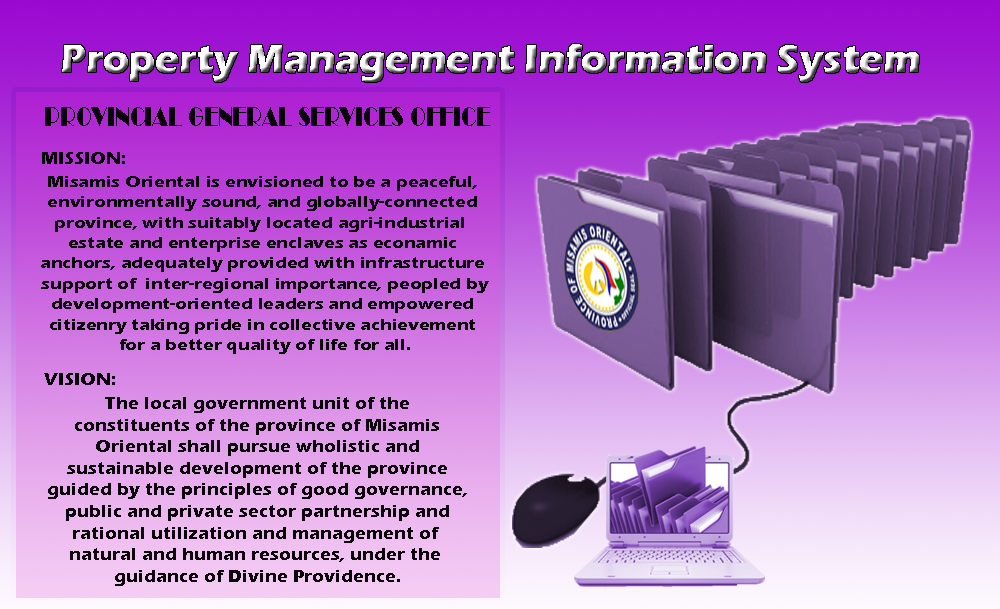
<style>
.page{position:relative;width:1000px;height:609px}
.page>*{position:absolute;margin:0}
.t1{font:40px "ErasITC-Bold"}
.t2{font:27.9px "Broadway";color:#090208;scale:0.74 1}
.t3{font:18px "ErasITC-Bold";color:#090208}
.t4{font:17px "ErasITC-Bold";color:#090208;scale:1.06 1}
.t5{font:18px "ErasITC-Bold";color:#050105}
</style>
<div class="page">
<p class="t1" style="left:62px;top:44px;width:857px;height:38px">Property Management Information System</p>
<p class="t2" style="left:45px;top:107px;width:445px;height:19px">PROVINCIAL GENERAL SERVICES OFFICE</p>
<p class="t3" style="left:42px;top:152px;width:83px;height:12px">MISSION:</p>
<p class="t4" style="left:41px;top:176px;width:448px;height:178px;text-align:center">Misamis Oriental is envisioned to be a peaceful, <br>environmentally sound, and globally-connected <br>province, with suitably located agri-industrial  <br>estate and enterprise enclaves as econamic <br>anchors, adequately provided with infrastructure <br>support of  inter-regional importance, peopled by<br>development-oriented leaders and empowered <br>citizenry taking pride in collective achievement <br>for a better quality of life for all.</p>
<p class="t5" style="left:44px;top:373px;width:71px;height:12px">VISION:</p>
<p class="t3" style="left:48px;top:397px;width:419px;height:189px;text-align:center">The local government unit of the<br>constituents of the province of Misamis<br>Oriental shall pursue wholistic and<br>sustainable development of the province<br>guided by the principles of good governance,<br>public and private sector partnership and<br>rational utilization and management of <br>natural and human resources, under the <br>guidance of Divine Providence.</p>
</div>
